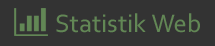
<style>
.page{position:relative;width:215px;height:46px;background:#333333}
.page>*{position:absolute;margin:0}
.t1{font:26.4px "Corbel";color:#628755}
</style>
<div class="page">
<p class="t1" style="left:56px;top:13px;width:144px;height:20px">Statistik Web</p>
</div>
